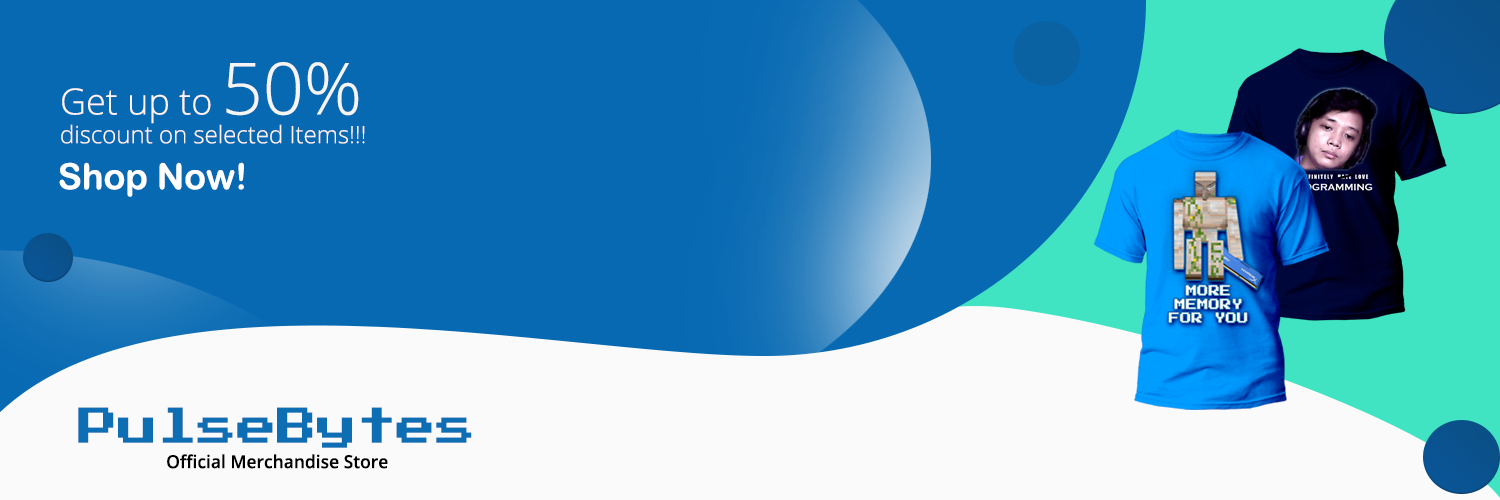
<style>
.page{position:relative;width:1500px;height:500px;background:#0669b2}
.page>*{position:absolute;margin:0}
.t1{font:24px "OpenSans-Light";color:#fff3f3}
.t2{font:36px "OpenSans-Light";color:#fff3f3}
.t3{font:72px "OpenSans-Light";color:#f5f5f5}
.t4{font:36px "ArialRoundedMTBold";color:#ffffff}
.t5{font:39.8px "PressStart2P-Regular";color:#0e6eb4}
.t6{font:18px "OpenSans-SemiBold";color:#000000;scale:0.97 1}
</style>
<div class="page">
<p class="t1" style="left:61px;top:62px;width:304px;height:82px"><span class="t2">Get up to </span><span class="t3">50% <br></span>discount on selected Items!!!</p>
<p class="t4" style="left:59px;top:162px;width:185px;height:35px">Shop Now!</p>
<p class="t5" style="left:78px;top:407px;width:394px;height:41px">PulseBytes</p>
<p class="t6" style="left:167px;top:454px;width:221px;height:15px">Official Merchandise Store</p>
</div>
